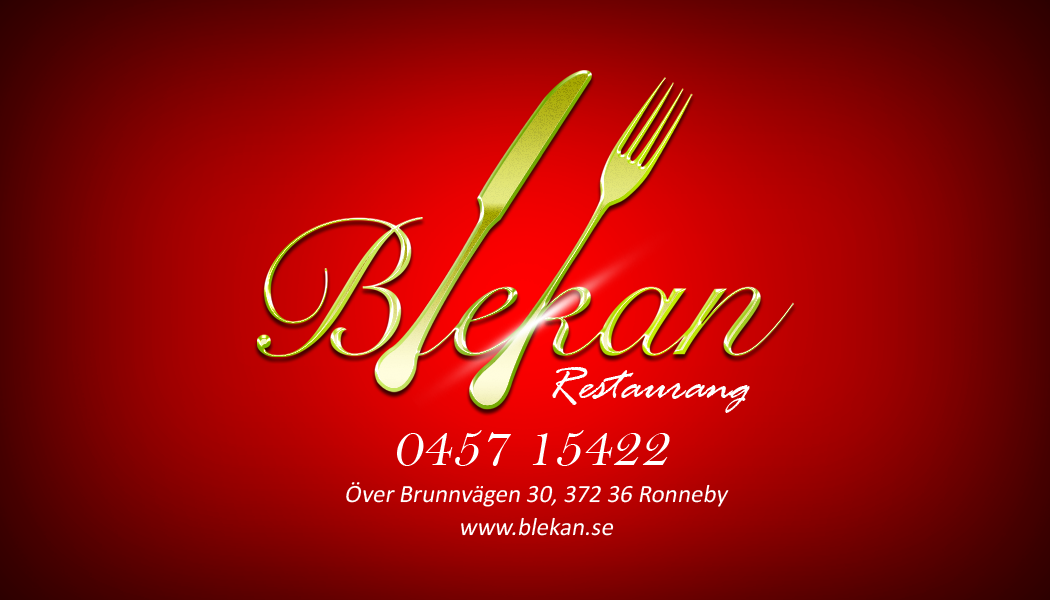
<style>
.page{position:relative;width:1050px;height:600px}
.page>*{position:absolute;margin:0}
.t1{font:50px "RageItalic";color:#fdfefe;font-style:italic}
.t2{font:58.3px "BellMT";color:#ffffff;font-style:italic}
.t3{font:25px/33.4px "Calibri";color:#ffffff;font-style:italic}
</style>
<div class="page">
<p class="t1" style="left:552px;top:367px;width:198px;height:46px">Restaurang</p>
<p class="t2" style="left:397px;top:430px;width:273px;height:36px">0457 15422</p>
<p class="t3" style="left:346px;top:482px;width:383px;height:54px;text-align:center">Över Brunnvägen 30, 372 36 Ronneby<br>www.blekan.se</p>
</div>
